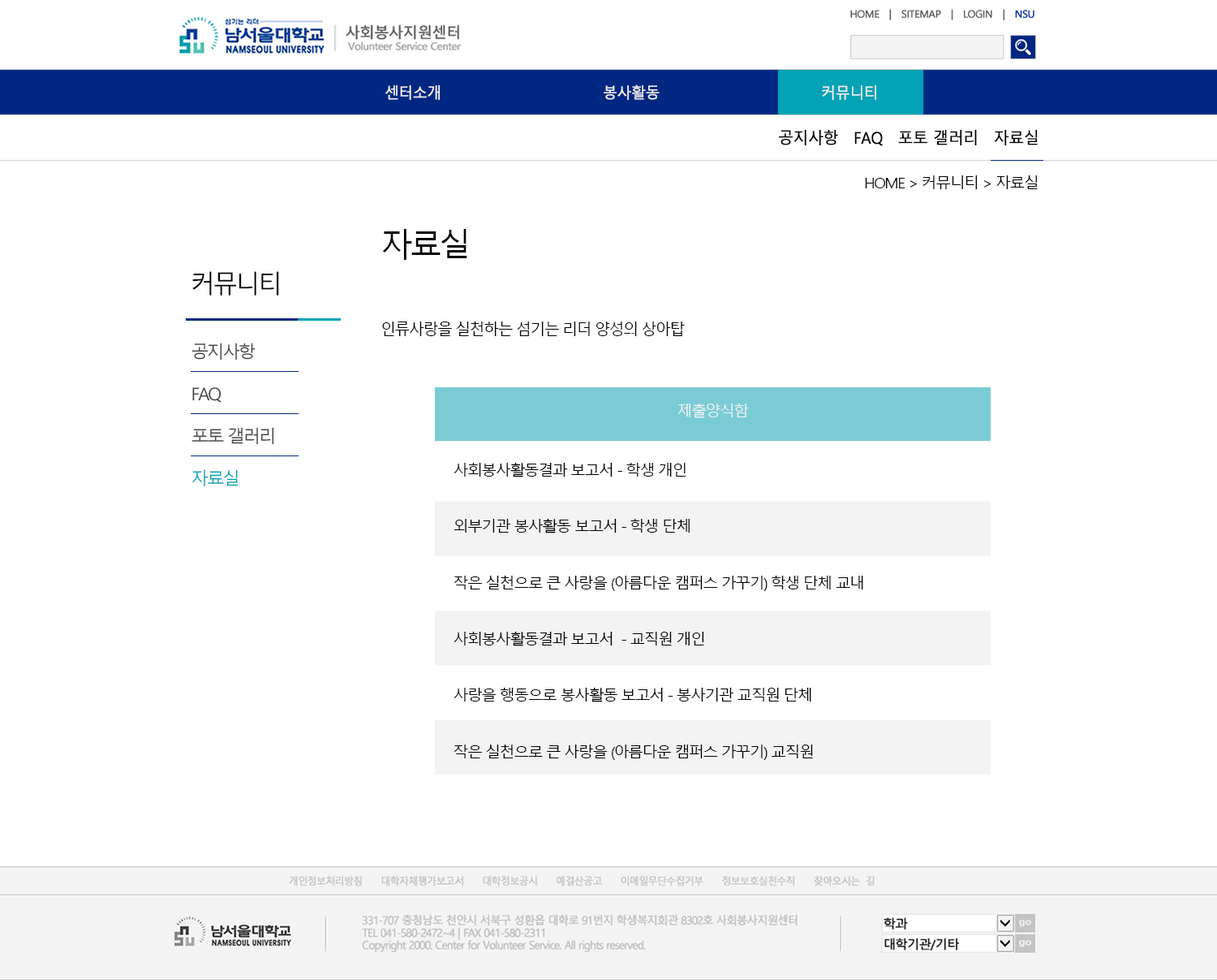
<style>
.page{position:relative;width:1217px;height:980px;background:#ffffff}
.page>*{position:absolute;margin:0}
.t1{font:15.2px "MalgunGothicRegular";letter-spacing:-0.05em;color:#f3f3f3;font-weight:bold;scale:0.95 1}
.t2{font:16.2px "MalgunGothicRegular";letter-spacing:-0.05em;color:#000000;font-weight:bold;scale:0.95 1}
.t3{font:15px "MalgunGothicRegular";letter-spacing:-0.1em;color:#000000;scale:1.05 1}
.t4{font:32.5px "MalgunGothicRegular";letter-spacing:-0.1em;color:#000000}
.t5{font:25.2px "MalgunGothicRegular";letter-spacing:-0.1em;color:#000000}
.t6{font:16.6px "MalgunGothicRegular";letter-spacing:-0.1em;color:#000000;scale:0.95 1}
.t7{font:17.5px "MalgunGothicRegular";letter-spacing:-0.1em;color:#454444}
.t8{font:15px "MalgunGothicRegular";letter-spacing:-0.1em;color:#f3f3f3;scale:1.05 1}
.t9{font:15px/28.1px "MalgunGothicRegular";letter-spacing:-0.1em;color:#000000;scale:1.05 1}
.t10{font:17.5px "MalgunGothicRegular";letter-spacing:-0.1em;color:#01a3b5}
</style>
<div class="page">
<p class="t1" style="left:385px;top:84px;width:491px;height:16px">센터소개        봉사활동       커뮤니티</p>
<p class="t2" style="left:779px;top:130px;width:259px;height:16px">공지사항　FAQ　포토 갤러리　자료실</p>
<p class="t3" style="left:865px;top:175px;width:173px;height:14px">HOME &gt; 커뮤니티 &gt; 자료실</p>
<p class="t4" style="left:382px;top:229px;width:85px;height:31px">자료실</p>
<p class="t5" style="left:192px;top:271px;width:87px;height:24px">커뮤니티</p>
<p class="t6" style="left:382px;top:321px;width:303px;height:15px">인류사랑을 실천하는 섬기는 리더 양성의 상아탑</p>
<p class="t7" style="left:192px;top:342px;width:64px;height:18px">공지사항</p>
<p class="t7" style="left:192px;top:387px;width:30px;height:16px">FAQ</p>
<p class="t8" style="left:678px;top:403px;width:71px;height:15px">제출양식함</p>
<p class="t7" style="left:192px;top:427px;width:82px;height:18px">포토 갤러리</p>
<p class="t9" style="left:454px;top:462px;width:409px;height:298px">사회봉사활동결과 보고서 - 학생 개인<br><br>외부기관 봉사활동 보고서 - 학생 단체<br><br>작은 실천으로 큰 사랑을 (아름다운 캠퍼스 가꾸기) 학생 단체 교내<br><br>사회봉사활동결과 보고서  - 교직원 개인<br><br>사랑을 행동으로 봉사활동 보고서 - 봉사기관 교직원 단체<br><br>작은 실천으로 큰 사랑을 (아름다운 캠퍼스 가꾸기) 교직원</p>
<p class="t10" style="left:192px;top:469px;width:47px;height:17px">자료실</p>
</div>
